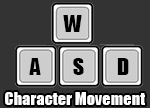
<style>
.page{position:relative;width:150px;height:108px;background:#333333}
.page>*{position:absolute;margin:0}
.t1{font:22px "Impact";color:#000000}
.t2{font:16.4px "Impact";color:#ffffff}
</style>
<div class="page">
<p class="t1" style="left:63px;top:15px;width:19px;height:17px">W</p>
<p class="t1" style="left:29px;top:58px;width:12px;height:17px">A</p>
<p class="t1" style="left:73px;top:58px;width:11px;height:17px">S</p>
<p class="t1" style="left:117px;top:58px;width:12px;height:17px">D</p>
<p class="t2" style="left:5px;top:92px;width:140px;height:13px">Character Movement</p>
</div>
